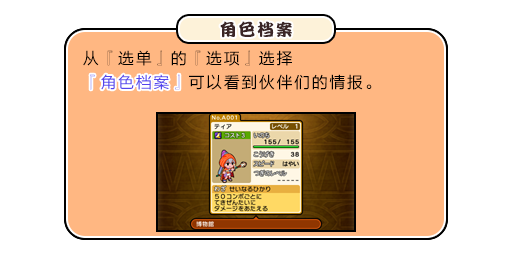
<style>
.page{position:relative;width:512px;height:256px;background:#ffffff}
.page>*{position:absolute;margin:0}
.t1{font:17px "DFPKanTingLiuW9";letter-spacing:0.1em;color:#3b2626}
.t2{font:16px/24px "FZLTHJW--GB1-0";letter-spacing:0.1em;color:#000000}
.t3{font:16px/24px "FZLTHJW--GB1-0";letter-spacing:0.1em;color:#5444ed}
.t4{font:16px "FZLTHJW--GB1-0";letter-spacing:0.1em;color:#5444ed}
</style>
<div class="page">
<p class="t1" style="left:220px;top:21px;width:72px;height:17px">角色档案</p>
<p class="t2" style="left:83px;top:50px;width:289px;height:40px">从『选单』的『选项』选择<br><span class="t3">『角色档案』</span>可以看到伙伴们的情报。</p>
<p class="t4" style="left:90px;top:74px;width:90px;height:16px">『角色档案』</p>
</div>
